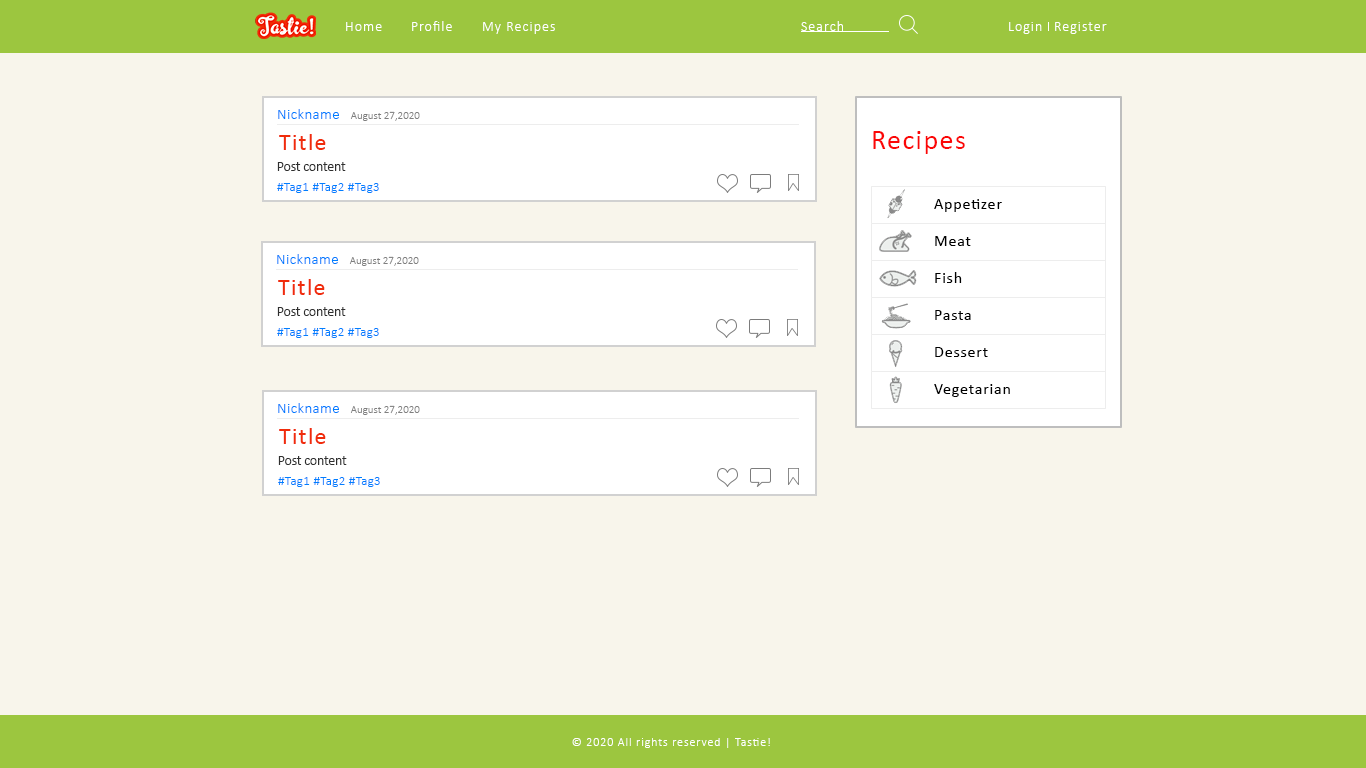
<style>
.page{position:relative;width:1366px;height:768px;background:#f8f5eb}
.page>*{position:absolute;margin:0}
.t1{font:14px "Calibri-Light";letter-spacing:0.075em;color:#ffffff}
.t2{font:15px "Calibri-Light";letter-spacing:0.025em;color:#007eff}
.t3{font:11px "Calibri-Light";color:#7f7f7f}
.t4{font:24px "Calibri";letter-spacing:0.05em;color:#f02c0b}
.t5{font:28px "Calibri";letter-spacing:0.05em;color:#fb0707}
.t6{font:14px "Calibri";letter-spacing:-0.015em;color:#2f2f2f}
.t7{font:13px "Calibri-Light";letter-spacing:0.025em;color:#007eff}
.t8{font:16px "Calibri";letter-spacing:0.05em;color:#000000}
.t9{font:12px "Calibri-Light";letter-spacing:0.075em;color:#ffffff}
</style>
<div class="page">
<p class="t1" style="left:346px;top:22px;width:36px;height:9px">Home</p>
<p class="t1" style="left:412px;top:21px;width:40px;height:10px">Profile</p>
<p class="t1" style="left:483px;top:22px;width:72px;height:12px">My Recipes</p>
<p class="t1" style="left:801px;top:21px;width:42px;height:10px">Search</p>
<p class="t1" style="left:1009px;top:22px;width:33px;height:12px">Login</p>
<p class="t1" style="left:1055px;top:22px;width:52px;height:12px">Register</p>
<p class="t2" style="left:278px;top:109px;width:61px;height:10px">Nickname</p>
<p class="t3" style="left:350px;top:111px;width:70px;height:10px">August 27,2020</p>
<p class="t4" style="left:279px;top:134px;width:47px;height:16px">Title</p>
<p class="t5" style="left:873px;top:131px;width:92px;height:23px">Recipes</p>
<p class="t6" style="left:277px;top:162px;width:69px;height:9px">Post content</p>
<p class="t7" style="left:277px;top:183px;width:102px;height:10px">#Tag1 #Tag2 #Tag3</p>
<p class="t8" style="left:934px;top:199px;width:68px;height:13px">Appetizer</p>
<p class="t8" style="left:935px;top:236px;width:36px;height:10px">Meat</p>
<p class="t2" style="left:277px;top:254px;width:61px;height:10px">Nickname</p>
<p class="t3" style="left:349px;top:256px;width:70px;height:10px">August 27,2020</p>
<p class="t4" style="left:278px;top:279px;width:47px;height:16px">Title</p>
<p class="t8" style="left:935px;top:272px;width:27px;height:11px">Fish</p>
<p class="t6" style="left:277px;top:307px;width:69px;height:9px">Post content</p>
<p class="t8" style="left:935px;top:310px;width:36px;height:10px">Pasta</p>
<p class="t7" style="left:277px;top:328px;width:102px;height:10px">#Tag1 #Tag2 #Tag3</p>
<p class="t8" style="left:935px;top:347px;width:53px;height:10px">Dessert</p>
<p class="t8" style="left:934px;top:384px;width:76px;height:13px">Vegetarian</p>
<p class="t2" style="left:278px;top:403px;width:61px;height:10px">Nickname</p>
<p class="t3" style="left:350px;top:405px;width:70px;height:10px">August 27,2020</p>
<p class="t4" style="left:279px;top:428px;width:47px;height:16px">Title</p>
<p class="t6" style="left:278px;top:456px;width:69px;height:9px">Post content</p>
<p class="t7" style="left:278px;top:477px;width:102px;height:10px">#Tag1 #Tag2 #Tag3</p>
<p class="t9" style="left:572px;top:738px;width:198px;height:10px">© 2020 All rights reserved | Tastie!</p>
</div>
